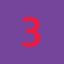
<style>
.page{position:relative;width:64px;height:64px;background:#75449b}
.page>*{position:absolute;margin:0}
.t1{font:45.3px "Corbel-Bold";color:#ee1941}
</style>
<div class="page">
<p class="t1" style="left:22px;top:17px;width:19px;height:30px">3</p>
</div>
